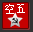
<style>
.page{position:relative;width:33px;height:32px;background:#c50000}
.page>*{position:absolute;margin:0}
.t1{font:10.8px "SimSun";color:#ffffff}
</style>
<div class="page">
<p class="t1" style="left:5px;top:4px;width:20px;height:10px">空五</p>
</div>
